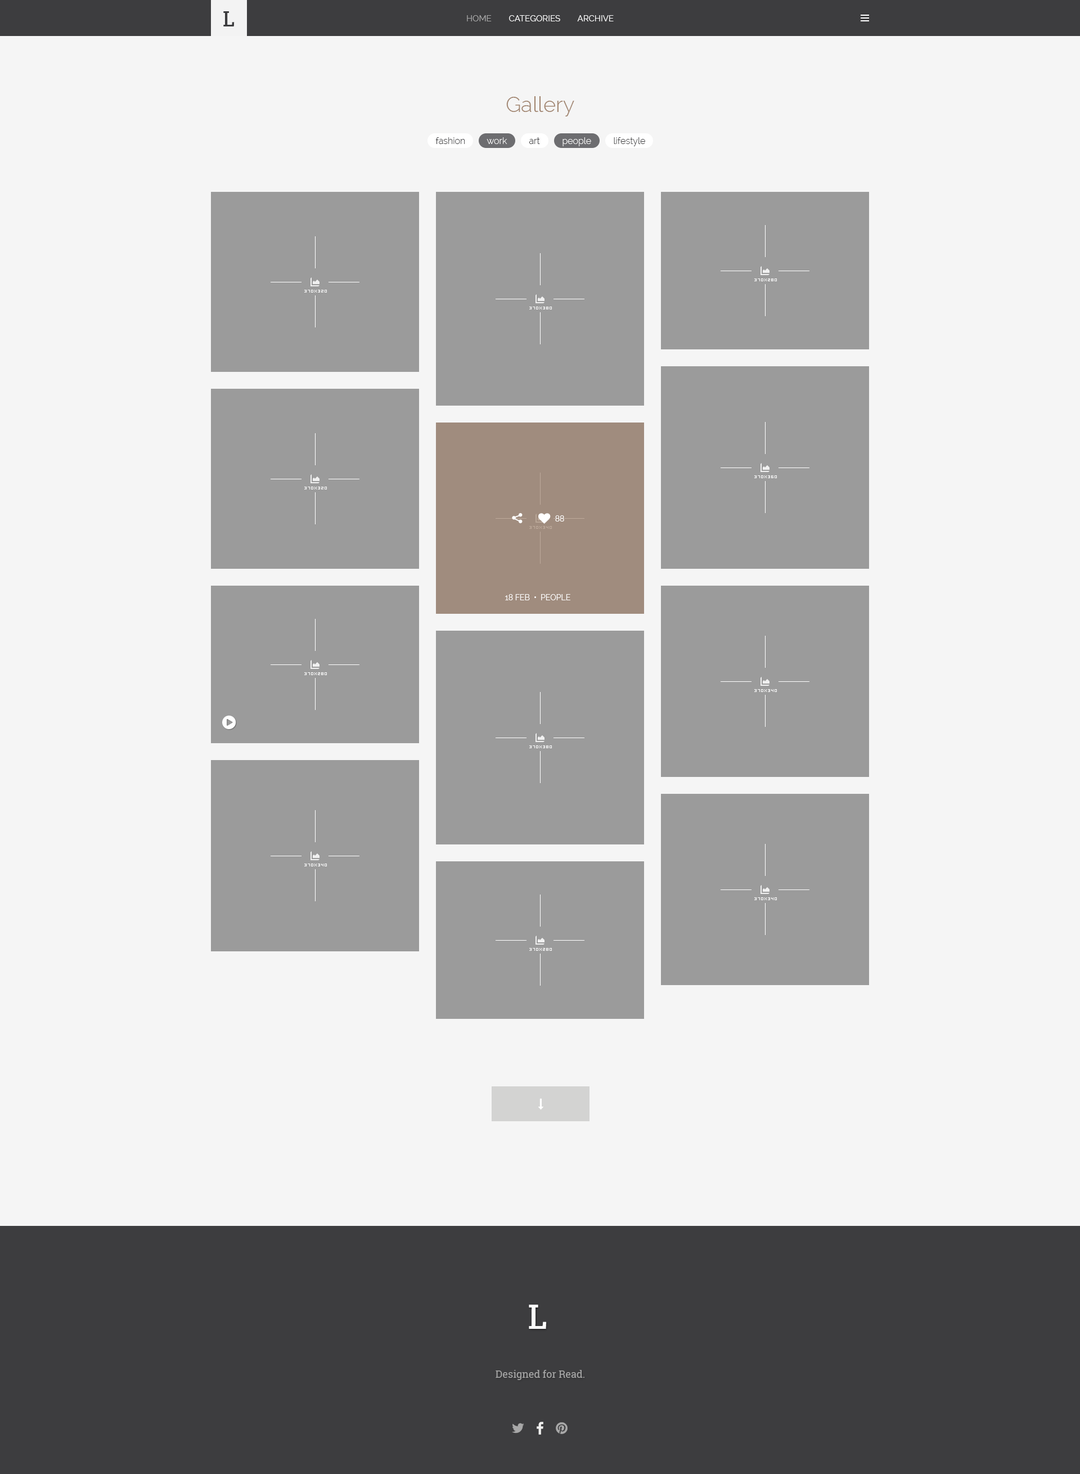
<style>
.page{position:relative;width:1080px;height:1474px;background:#f5f5f5}
.page>*{position:absolute;margin:0}
.t1{font:8.4px "Raleway";color:#ffffff}
.t2{font:8.4px "Raleway";color:#a8a8a8}
.t3{font:21.4px "Raleway-Light";color:#a28671}
.t4{font:9px "Raleway-Light";color:#3d3d3f}
.t5{font:9px "Raleway-Light";color:#ffffff}
.t6{font:7.9px "Raleway";color:#ffffff}
.t7{font:7.9px "Raleway";color:#ffffff;text-transform:uppercase}
</style>
<div class="page">
<p class="t1" style="left:467px;top:15px;width:147px;height:6px"><span class="t2">HOME</span>        CATEGORIES        ARCHIVE</p>
<p class="t3" style="left:506px;top:96px;width:68px;height:20px">Gallery</p>
<p class="t4" style="left:435px;top:137px;width:30px;height:7px">fashion</p>
<p class="t5" style="left:487px;top:137px;width:20px;height:7px">work</p>
<p class="t4" style="left:529px;top:137px;width:11px;height:7px">art</p>
<p class="t5" style="left:562px;top:137px;width:29px;height:9px">people</p>
<p class="t4" style="left:614px;top:137px;width:31px;height:9px">lifestyle</p>
<p class="t6" style="left:555px;top:515px;width:9px;height:6px">88</p>
<p class="t7" style="left:505px;top:594px;width:65px;height:6px">18 feb  •  people</p>
</div>
